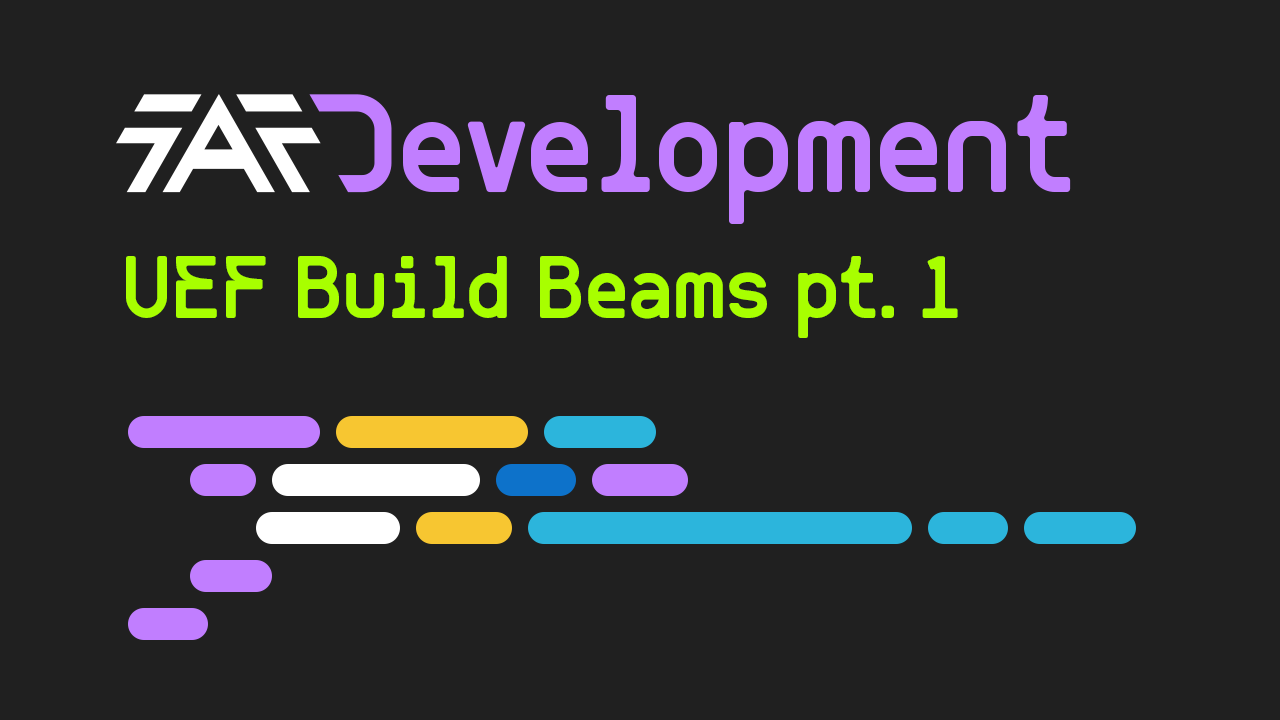
<style>
.page{position:relative;width:1280px;height:720px;background:#202020}
.page>*{position:absolute;margin:0}
.t1{font:144.1px "Nicolatte-Regular";color:#c17eff}
.t2{font:92.1px "Nicolatte-Regular";color:#a8ff00}
</style>
<div class="page">
<p class="t1" style="left:403px;top:95px;width:668px;height:129px">evelopment</p>
<p class="t2" style="left:126px;top:256px;width:832px;height:82px">UEF Build Beams pt. 1</p>
</div>
